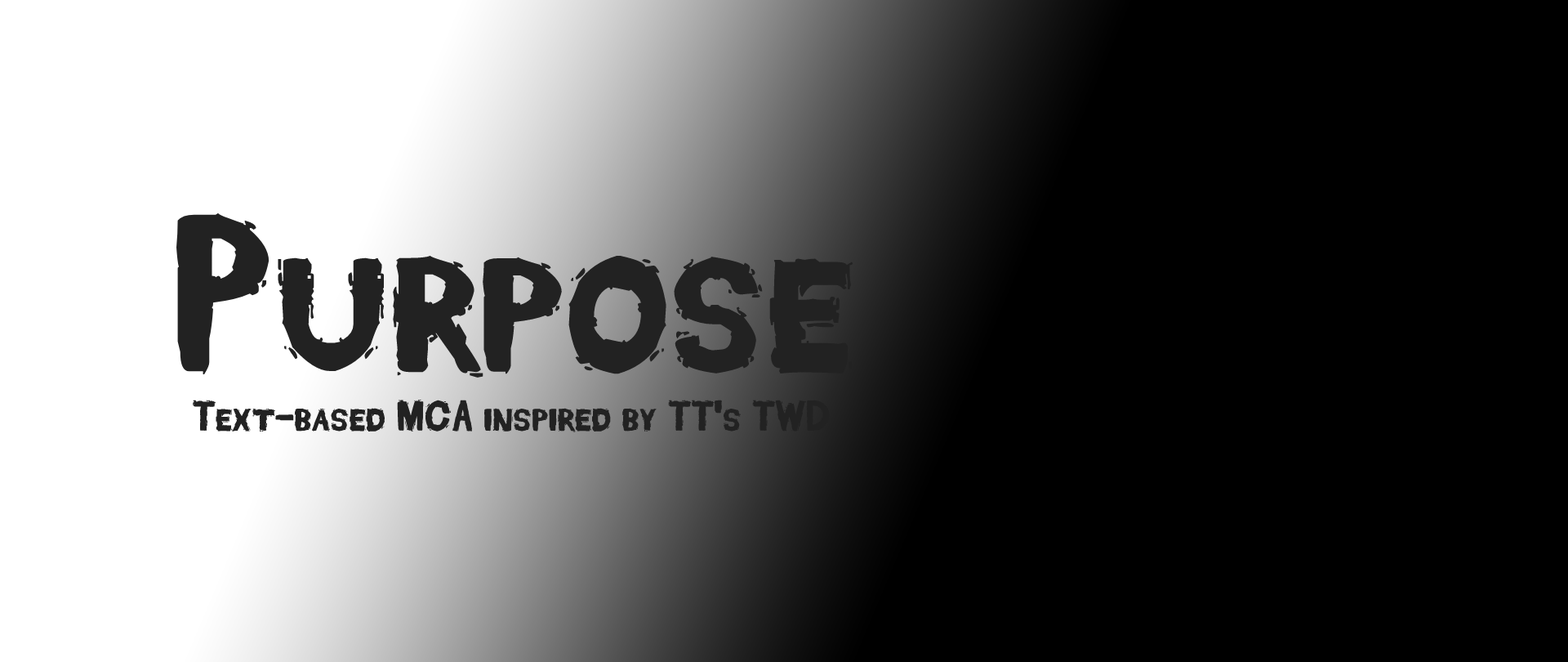
<style>
.page{position:relative;width:1568px;height:662px;background:#000000}
.page>*{position:absolute;margin:0}
.t1{font:224.5px "DeadFontWalking";color:#222222}
.t2{font:43.5px "DeadFontWalking";color:#222222}
</style>
<div class="page">
<p class="t1" style="left:176px;top:212px;width:677px;height:165px">Purpose</p>
<p class="t2" style="left:193px;top:399px;width:637px;height:33px">Text-based MCA inspired by TT's TWD</p>
</div>
